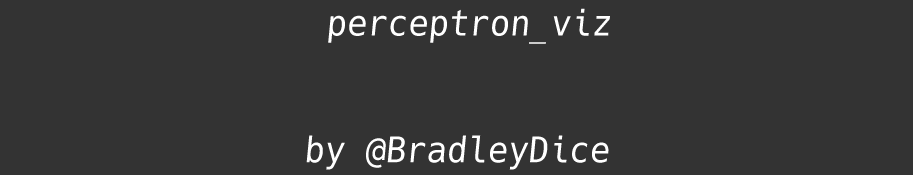
<style>
.page{position:relative;width:913px;height:175px;background:#333333}
.page>*{position:absolute;margin:0}
.t1{font:35.4px "Hack-Regular";color:#ffffff;scale:0.96 1}
</style>
<div class="page">
<p class="t1" style="left:306px;top:8px;width:304px;height:162px;text-align:center">perceptron_viz<br><br><br>by @BradleyDice</p>
</div>
